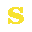
<style>
.page{position:relative;width:32px;height:32px;background:#ffffff}
.page>*{position:absolute;margin:0}
.t1{font:24.5px "ClarendonBT-Black";color:#f7e232}
</style>
<div class="page">
<p class="t1" style="left:8px;top:7px;width:16px;height:17px">S</p>
</div>
